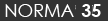
<style>
.page{position:relative;width:108px;height:21px;background:#333333}
.page>*{position:absolute;margin:0}
.t1{font:18px "CenturyGothic";color:#ffffff}
.t2{font:18px "CenturyGothic-Bold";color:#ffffff}
</style>
<div class="page">
<p class="t1" style="left:5px;top:4px;width:69px;height:13px">NORMA</p>
<p class="t2" style="left:81px;top:4px;width:20px;height:13px">35</p>
</div>
